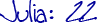
<style>
.page{position:relative;width:97px;height:27px;background:#ffffff}
.page>*{position:absolute;margin:0}
.t1{font:36px "TallPaul";color:#000099}
</style>
<div class="page">
<p class="t1" style="left:0px;top:0px;width:97px;height:23px">Julia: 22</p>
</div>
